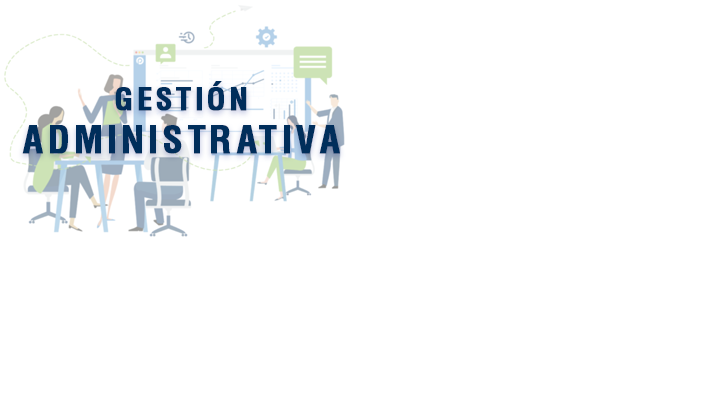
<style>
.page{position:relative;width:720px;height:394px;background:#ffffff}
.page>*{position:absolute;margin:0}
.t1{font:36px "Helvetica-Condensed-Bold";letter-spacing:0.1em;color:#002e5b;font-weight:bold}
.t2{font:30px "Helvetica-Condensed-Bold";letter-spacing:0.1em;color:#002e5b;font-weight:bold}
</style>
<div class="page">
<p class="t1" style="left:22px;top:81px;width:318px;height:73px;text-align:center"><span class="t2">GESTIÓN<br></span>ADMINISTRATIVA</p>
</div>
